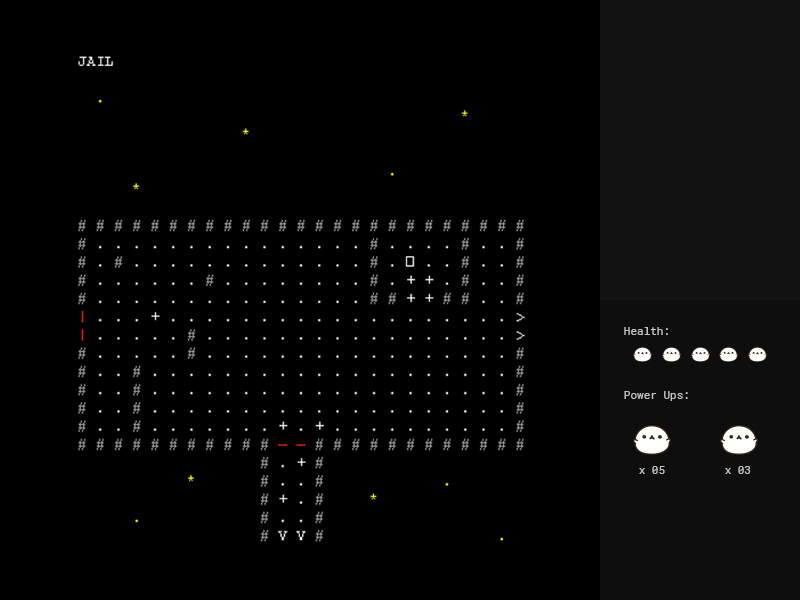
<style>
.page{position:relative;width:800px;height:600px;background:#000000}
.page>*{position:absolute;margin:0}
.t1{font:11px "RobotoMono-Regular";color:#c3c3c3}
</style>
<div class="page">
<p class="t1" style="left:624px;top:327px;width:44px;height:8px">Health:</p>
<p class="t1" style="left:624px;top:391px;width:64px;height:10px">Power Ups:</p>
<p class="t1" style="left:639px;top:466px;width:26px;height:8px">x 05</p>
<p class="t1" style="left:725px;top:466px;width:26px;height:8px">x 03</p>
</div>
